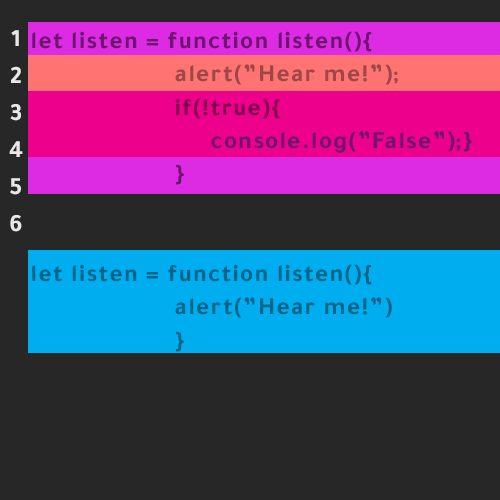
<style>
.page{position:relative;width:500px;height:500px;background:#272727}
.page>*{position:absolute;margin:0}
.t1{font:25px "Tajawal-Bold";letter-spacing:0.05em;color:#e8e8e8}
.t2{font:25px/33.3px "Tajawal-Bold";letter-spacing:0.05em;color:#6d1570}
.t3{font:25px/33.3px "Tajawal-Bold";letter-spacing:0.05em;color:#9e4747}
.t4{font:25px/33.3px "Tajawal-Bold";letter-spacing:0.05em;color:#81004d}
.t5{font:25px/33.3px "Tajawal-Bold";letter-spacing:0.05em;color:#00658b}
</style>
<div class="page">
<p class="t1" style="left:11px;top:30px;width:8px;height:16px">1</p>
<p class="t2" style="left:32px;top:31px;width:440px;height:154px">let listen = function listen(){<br>    <span class="t3">alert(”Hear me!”);<br>    </span><span class="t4">if(!true){<br></span>     console.log(”False”);}<br>    }</p>
<p class="t1" style="left:11px;top:66px;width:10px;height:17px">2</p>
<p class="t1" style="left:10px;top:104px;width:11px;height:17px">3</p>
<p class="t1" style="left:9px;top:141px;width:14px;height:16px">4</p>
<p class="t1" style="left:10px;top:178px;width:11px;height:17px">5</p>
<p class="t1" style="left:10px;top:215px;width:12px;height:17px">6</p>
<p class="t5" style="left:32px;top:264px;width:360px;height:88px">let listen = function listen(){<br>    alert(”Hear me!”)<br>    }</p>
</div>
